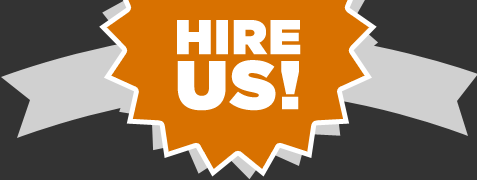
<style>
.page{position:relative;width:477px;height:180px;background:#333333}
.page>*{position:absolute;margin:0}
.t1{font:48.8px "GothamHTF-Ultra";letter-spacing:0.04em;color:#ffffff;text-transform:uppercase}
.t2{font:68.8px "GothamHTF-Ultra";letter-spacing:0.04em;color:#ffffff;text-transform:uppercase}
</style>
<div class="page">
<p class="t1" style="left:177px;top:20px;width:124px;height:35px">Hire</p>
<p class="t2" style="left:177px;top:60px;width:122px;height:51px">US!</p>
</div>
